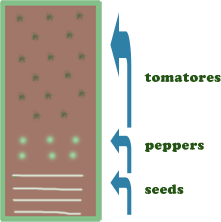
<style>
.page{position:relative;width:221px;height:222px;background:#ffffff}
.page>*{position:absolute;margin:0}
.t1{font:14px "CooperBlack";letter-spacing:0.03em;color:#245413}
</style>
<div class="page">
<p class="t1" style="left:144px;top:73px;width:77px;height:9px">tomatores</p>
<p class="t1" style="left:145px;top:142px;width:59px;height:10px">peppers</p>
<p class="t1" style="left:145px;top:184px;width:39px;height:10px">seeds</p>
</div>
